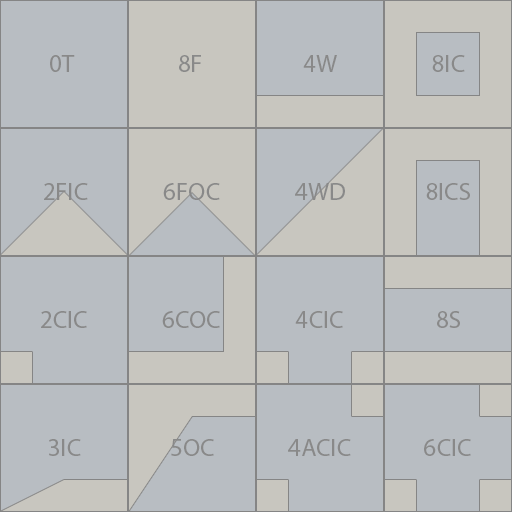
<style>
.page{position:relative;width:512px;height:512px;background:#b8bdc2}
.page>*{position:absolute;margin:0}
.t1{font:25px "MyriadPro-Regular";color:#898989}
</style>
<div class="page">
<p class="t1" style="left:50px;top:55px;width:25px;height:17px">0T</p>
<p class="t1" style="left:179px;top:55px;width:22px;height:17px">8F</p>
<p class="t1" style="left:303px;top:55px;width:34px;height:17px">4W</p>
<p class="t1" style="left:432px;top:55px;width:33px;height:17px">8IC</p>
<p class="t1" style="left:44px;top:183px;width:44px;height:17px">2FIC</p>
<p class="t1" style="left:163px;top:183px;width:57px;height:17px">6FOC</p>
<p class="t1" style="left:295px;top:183px;width:50px;height:17px">4WD</p>
<p class="t1" style="left:426px;top:183px;width:44px;height:17px">8ICS</p>
<p class="t1" style="left:41px;top:311px;width:46px;height:17px">2CIC</p>
<p class="t1" style="left:162px;top:311px;width:58px;height:17px">6COC</p>
<p class="t1" style="left:295px;top:311px;width:48px;height:17px">4CIC</p>
<p class="t1" style="left:437px;top:311px;width:23px;height:17px">8S</p>
<p class="t1" style="left:49px;top:439px;width:32px;height:17px">3IC</p>
<p class="t1" style="left:171px;top:439px;width:43px;height:17px">5OC</p>
<p class="t1" style="left:288px;top:439px;width:63px;height:17px">4ACIC</p>
<p class="t1" style="left:424px;top:439px;width:47px;height:17px">6CIC</p>
</div>
